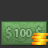
<style>
.page{position:relative;width:48px;height:48px;background:#333333}
.page>*{position:absolute;margin:0}
.t1{font:15px "MyriadPro-Bold";color:#7da674}
.t2{font:11px "MyriadPro-Bold";color:#93b78a}
.t3{font:15px "MyriadPro-Bold"}
</style>
<div class="page">
<p class="t1" style="left:5px;top:27px;width:7px;height:13px">$</p>
<p class="t2" style="left:14px;top:29px;width:18px;height:8px">100</p>
<p class="t3" style="left:35px;top:27px;width:7px;height:13px">$</p>
</div>
